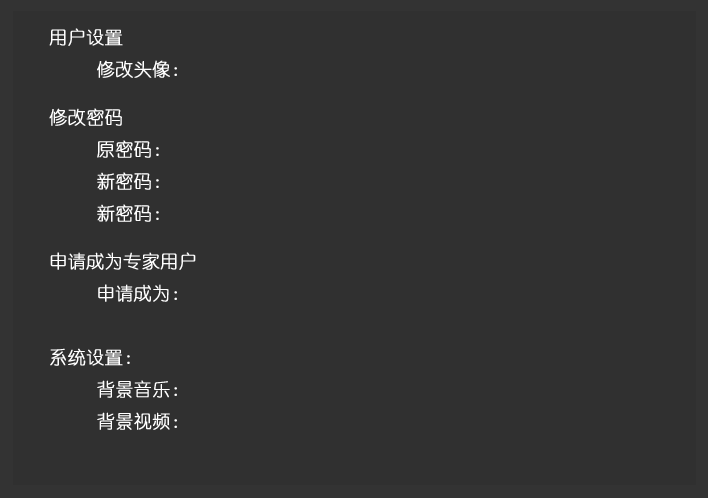
<style>
.page{position:relative;width:708px;height:498px;background:#303030}
.page>*{position:absolute;margin:0}
.t1{font:18px/16px "YouYuan";color:#ffffff;font-weight:bold}
</style>
<div class="page">
<p class="t1" style="left:49px;top:28px;width:147px;height:402px">用户设置<br><br>     修改头像：<br><br><br>修改密码<br><br>     原密码：<br><br>     新密码：<br><br>     新密码：<br><br><br>申请成为专家用户<br><br>     申请成为：<br><br><br><br>系统设置：<br><br>     背景音乐：<br><br>     背景视频：</p>
</div>
